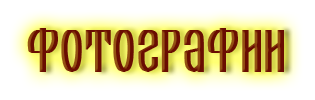
<style>
.page{position:relative;width:315px;height:100px;background:#ffffff}
.page>*{position:absolute;margin:0}
.t1{font:58.3px "ALaRuss";color:#690d01;font-weight:bold}
</style>
<div class="page">
<p class="t1" style="left:27px;top:28px;width:257px;height:44px">фотографии</p>
</div>
